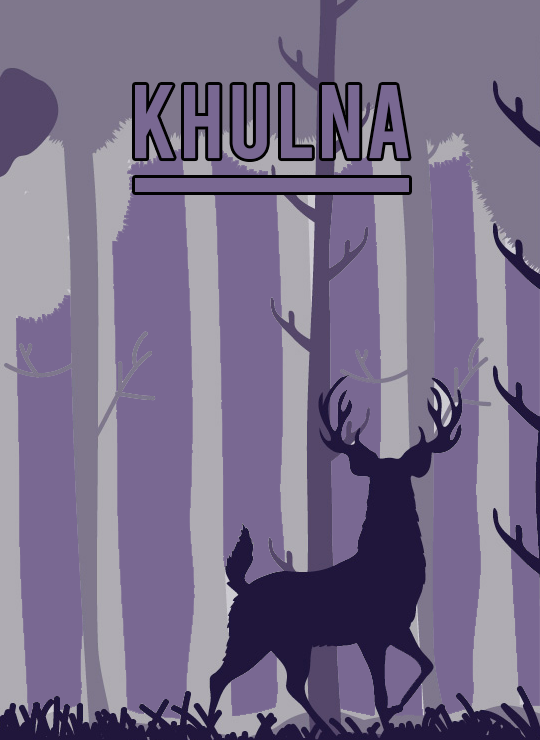
<style>
.page{position:relative;width:540px;height:740px;background:#796892}
.page>*{position:absolute;margin:0}
.t1{font:104.2px "Bebas-Regular";letter-spacing:0.02em;color:#796892}
</style>
<div class="page">
<p class="t1" style="left:135px;top:85px;width:274px;height:74px">Khulna</p>
</div>
